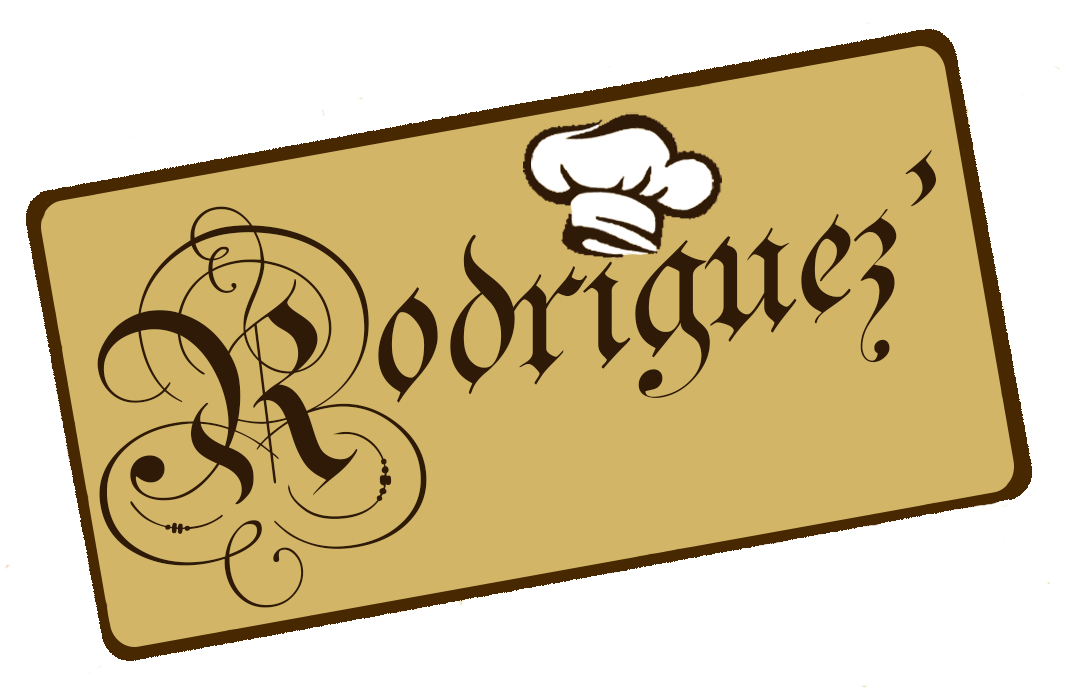
<style>
.page{position:relative;width:1068px;height:696px;background:#d2b567}
.page>*{position:absolute;margin:0}
.t1{font:372.2px "Parchment-Regular";color:#2f1a07}
.t2{font:439.1px "Parchment-Regular";color:#2f1a07}
</style>
<div class="page">
<p class="t1" style="left:378px;top:149px;width:559px;height:254px">odriguez’</p>
<p class="t2" style="left:97px;top:206px;width:330px;height:402px;rotate:-7deg">R</p>
</div>
